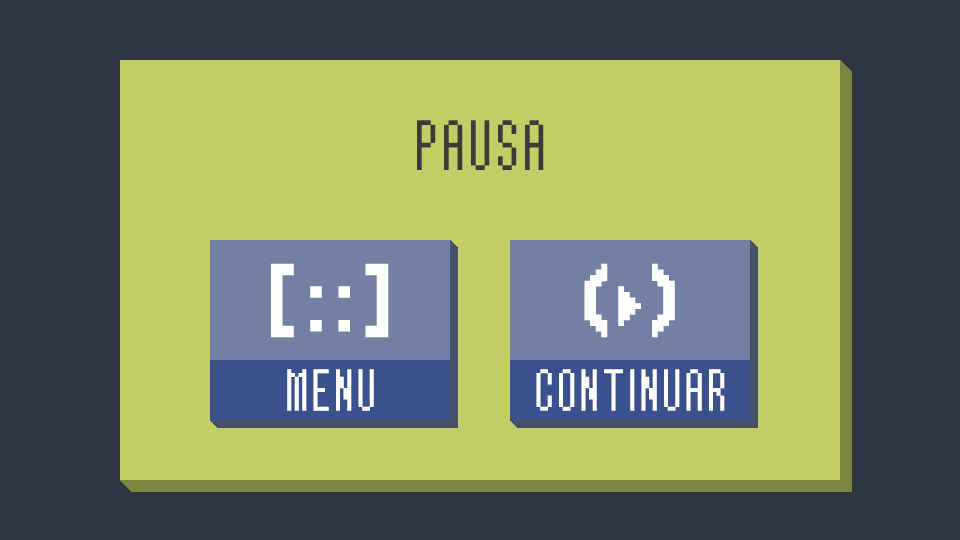
<style>
.page{position:relative;width:960px;height:540px;background:#303641}
.page>*{position:absolute;margin:0}
.t1{font:72px "ReturnOfGanonReg";color:#3d3a3a}
.t2{font:90px "ReturnOfGanonReg";color:#ffffff}
.t3{font:90px "ReturnOfGanonReg";letter-spacing:0.05em;color:#ffffff}
.t4{font:60px "ReturnOfGanonReg";color:#ffffff}
</style>
<div class="page">
<p class="t1" style="left:417px;top:120px;width:127px;height:50px">PAUSA</p>
<p class="t2" style="left:271px;top:263px;width:118px;height:75px">[:<span class="t3">:]</span></p>
<p class="t2" style="left:584px;top:263px;width:91px;height:75px">(&gt;)</p>
<p class="t4" style="left:287px;top:369px;width:87px;height:42px">MENU</p>
<p class="t4" style="left:536px;top:369px;width:189px;height:42px">CONTINUAR</p>
</div>
